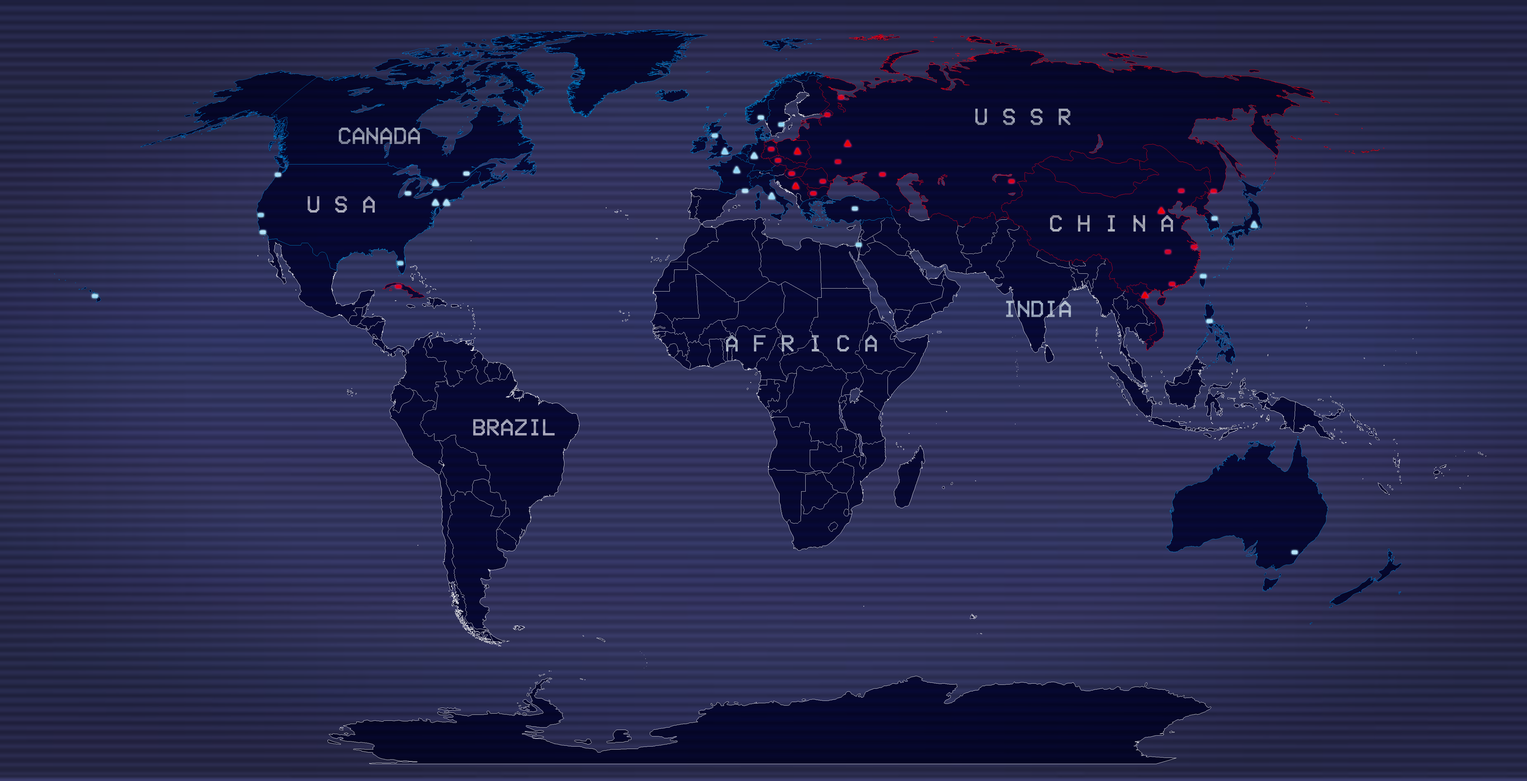
<style>
.page{position:relative;width:1527px;height:781px}
.page>*{position:absolute;margin:0}
.t1{font:23.7px "VCROSDMono";color:#979cac}
.t2{font:23.7px "VCROSDMono";color:#9298a9}
.t3{font:23.7px "VCROSDMono";color:#9e9eae}
.t4{font:23.7px "VCROSDMono";color:#a2a4b0}
.t5{font:23.7px "VCROSDMono";color:#9ca9bd}
.t6{font:23.7px "VCROSDMono";color:#9aa1b4}
.t7{font:23.7px "VCROSDMono";color:#9c9db1}
</style>
<div class="page">
<p class="t1" style="left:975px;top:109px;width:95px;height:16px">U S S R</p>
<p class="t2" style="left:339px;top:128px;width:81px;height:16px">CANADA</p>
<p class="t3" style="left:307px;top:196px;width:68px;height:16px">U S A</p>
<p class="t4" style="left:1050px;top:215px;width:123px;height:16px">C H I N A</p>
<p class="t5" style="left:1006px;top:301px;width:65px;height:16px">INDIA</p>
<p class="t6" style="left:726px;top:335px;width:151px;height:16px">A F R I C A</p>
<p class="t7" style="left:473px;top:419px;width:82px;height:16px">BRAZIL</p>
</div>
